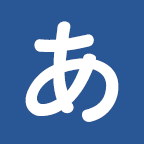
<style>
.page{position:relative;width:144px;height:144px;background:#295795}
.page>*{position:absolute;margin:0}
.t1{font:130px "HYgsrB";color:#ffffff}
</style>
<div class="page">
<p class="t1" style="left:25px;top:21px;width:94px;height:101px">あ</p>
</div>
